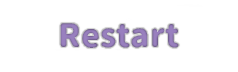
<style>
.page{position:relative;width:238px;height:72px;background:#ffffff}
.page>*{position:absolute;margin:0}
.t1{font:32px "Corporate-Logo-Rounded";color:#9980bf}
</style>
<div class="page">
<p class="t1" style="left:60px;top:23px;width:119px;height:25px">Restart</p>
</div>
